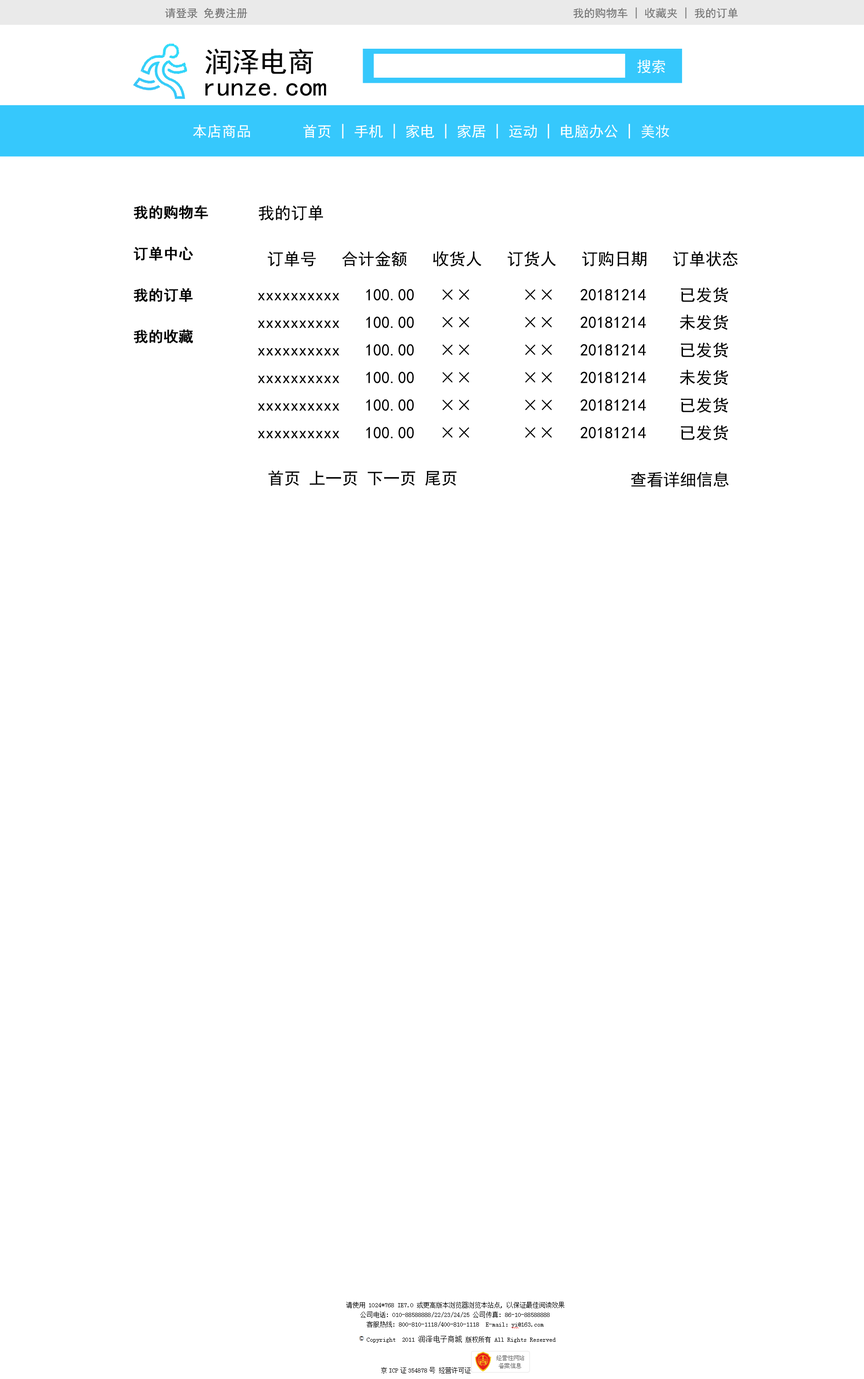
<style>
.page{position:relative;width:864px;height:1379px;background:#ffffff}
.page>*{position:absolute;margin:0}
.t1{font:11px "SimHei";color:#6f6f6f}
.t2{font:27.6px "SimHei";color:#010101}
.t3{font:14.7px "SimHei";color:#ffffff}
.t4{font:14.7px/13.8px "SimHei";color:#000000;font-weight:bold}
.t5{font:16.6px "SimHei";color:#000000}
.t6{font:16.6px/13.8px "SimHei";color:#000000}
</style>
<div class="page">
<p class="t1" style="left:165px;top:8px;width:82px;height:10px">请登录 免费注册</p>
<p class="t1" style="left:573px;top:7px;width:165px;height:12px">我的购物车 | 收藏夹 | 我的订单</p>
<p class="t2" style="left:206px;top:49px;width:107px;height:25px">润泽电商</p>
<p class="t3" style="left:637px;top:59px;width:28px;height:15px">搜索</p>
<p class="t2" style="left:206px;top:83px;width:120px;height:13px">runze.com</p>
<p class="t3" style="left:193px;top:124px;width:476px;height:15px">本店商品       首页 | 手机 | 家电 | 家居 | 运动 | 电脑办公 | 美妆</p>
<p class="t4" style="left:134px;top:205px;width:74px;height:138px">我的购物车<br><br><br>订单中心<br><br><br>我的订单<br><br><br>我的收藏</p>
<p class="t5" style="left:259px;top:205px;width:64px;height:16px">我的订单</p>
<p class="t5" style="left:268px;top:251px;width:470px;height:16px">订单号   合计金额   收货人   订货人   订购日期   订单状态</p>
<p class="t6" style="left:258px;top:287px;width:471px;height:153px">xxxxxxxxxx   100.00   ××      ××   20181214    已发货<br><br>xxxxxxxxxx   100.00   ××      ××   20181214    未发货<br><br>xxxxxxxxxx   100.00   ××      ××   20181214    已发货<br><br>xxxxxxxxxx   100.00   ××      ××   20181214    未发货<br><br>xxxxxxxxxx   100.00   ××      ××   20181214    已发货<br><br>xxxxxxxxxx   100.00   ××      ××   20181214    已发货</p>
<p class="t5" style="left:269px;top:470px;width:188px;height:16px">首页 上一页 下一页 尾页</p>
<p class="t5" style="left:631px;top:472px;width:98px;height:15px">查看详细信息</p>
</div>
